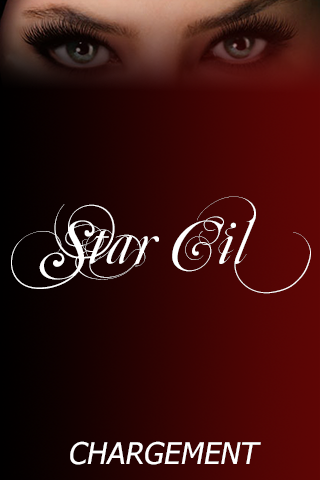
<style>
.page{position:relative;width:320px;height:480px}
.page>*{position:absolute;margin:0}
.t1{font:65px "MutluOrnamental";color:#ffffff}
.t2{font:30px "Tahoma";color:#ffffff;font-style:italic}
</style>
<div class="page">
<p class="t1" style="left:11px;top:196px;width:300px;height:98px">Star Cil</p>
<p class="t2" style="left:70px;top:441px;width:191px;height:24px">CHARGEMENT</p>
</div>
